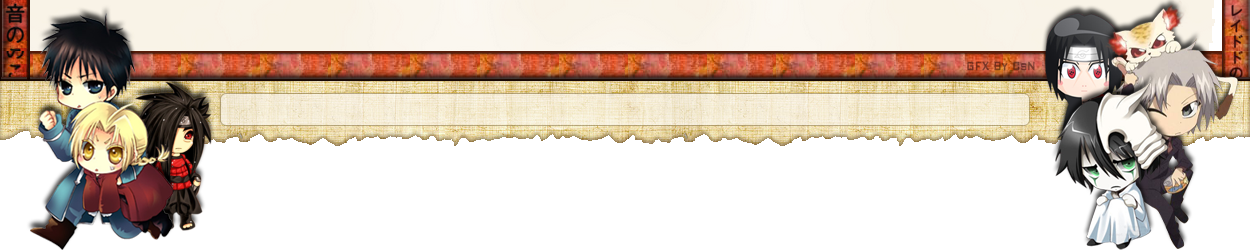
<style>
.page{position:relative;width:1250px;height:250px;background:#ffffff}
.page>*{position:absolute;margin:0}
.t1{font:15.8px "BankGothicBT-Medium";color:#793321;font-weight:bold;scale:0.63 1}
</style>
<div class="page">
<p class="t1" style="left:967px;top:61px;width:68px;height:10px">GFX By CsN</p>
</div>
